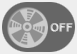
<style>
.page{position:relative;width:77px;height:54px;background:#666666}
.page>*{position:absolute;margin:0}
.t1{font:11px "Arial-BoldMT";font-weight:bold}
</style>
<div class="page">
<p class="t1" style="left:50px;top:23px;width:23px;height:9px">OFF</p>
</div>
